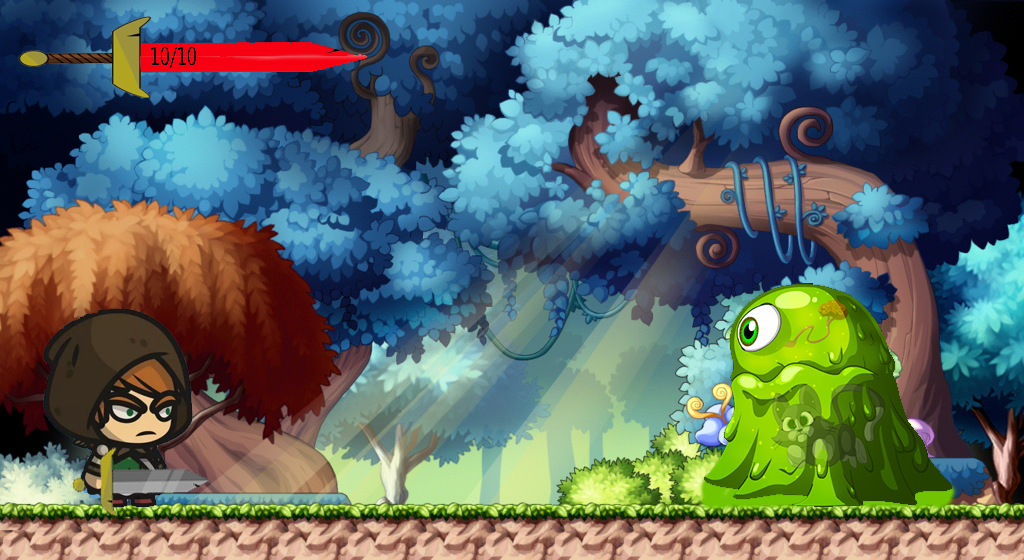
<style>
.page{position:relative;width:1024px;height:560px}
.page>*{position:absolute;margin:0}
.t1{font:26.3px "MicrosoftPhagsPa";color:#000000;scale:0.68 1}
</style>
<div class="page">
<p class="t1" style="left:151px;top:47px;width:45px;height:21px">10/10<br><br>10/10</p>
</div>
